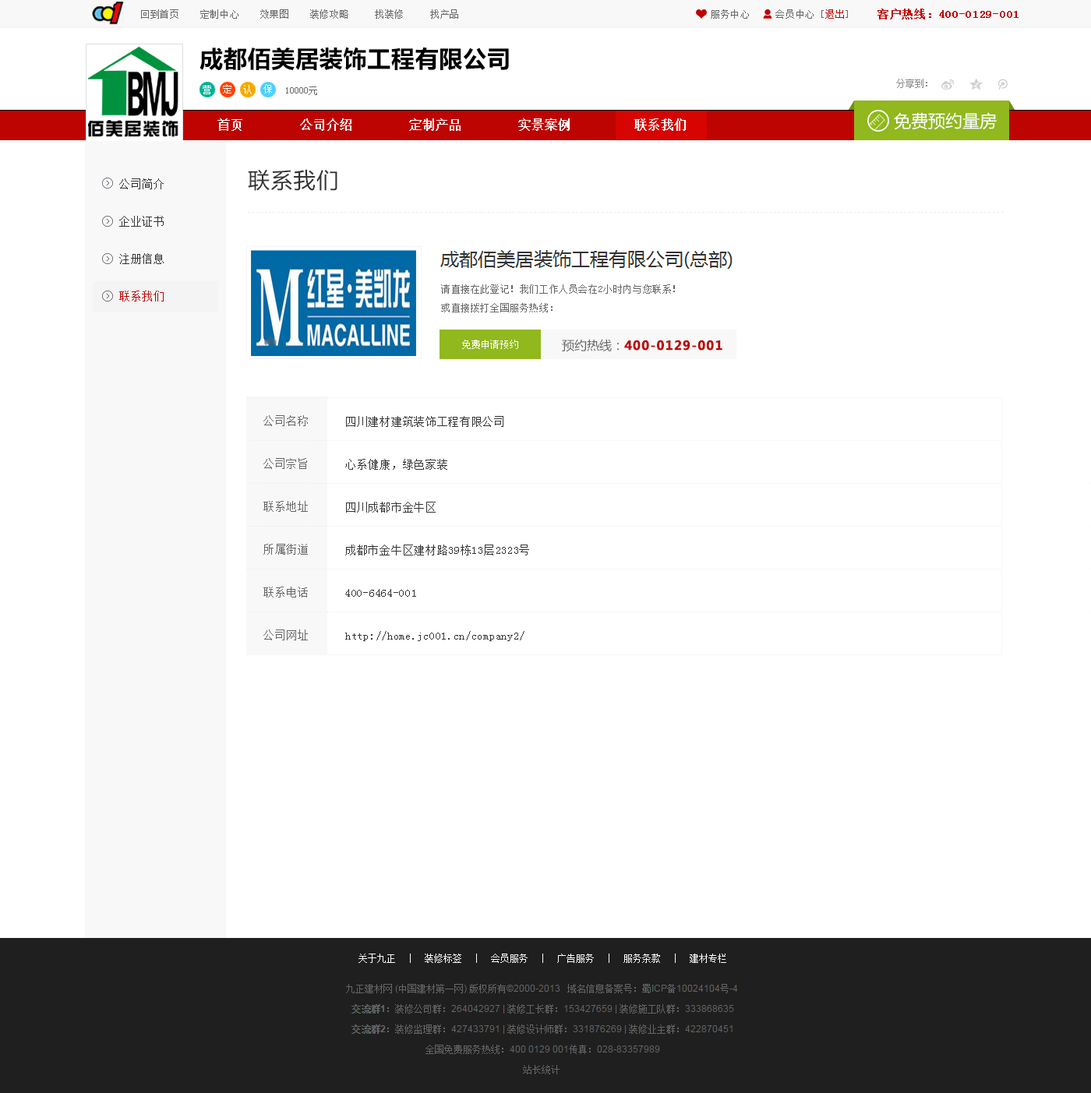
<style>
.page{position:relative;width:1091px;height:1093px;background:#ffffff}
.page>*{position:absolute;margin:0}
.t1{font:9.3px "NSimSun";letter-spacing:0.05em;color:#666666}
.t2{font:9.3px "NSimSun";letter-spacing:0.05em;color:#bc0500}
.t3{font:10.9px "NSimSun";letter-spacing:0.05em;color:#bc0500;font-weight:bold}
.t4{font:23.4px "MicrosoftYaHei-Bold";letter-spacing:0.025em;color:#000000}
.t5{font:9.3px "NSimSun";letter-spacing:0.075em;color:#ffffff}
.t6{font:9.3px "NSimSun";color:#666666}
.t7{font:17.1px "MicrosoftYaHei";color:#ffffff}
.t8{font:12.5px "NSimSun";color:#ffffff;font-weight:bold}
.t9{font:21.8px "MicrosoftYaHei";letter-spacing:0.05em;color:#333333}
.t10{font:10.9px/37.4px "NSimSun";letter-spacing:0.05em;color:#333333}
.t11{font:10.9px/37.4px "NSimSun";letter-spacing:0.05em;color:#bd0401}
.t12{font:4.7px "NSimSun";letter-spacing:0.4em;color:#eeeeee}
.t13{font:9.3px/18.7px "NSimSun";letter-spacing:0.05em;color:#666666}
.t14{font:9px "NSimSun";letter-spacing:0.05em;color:#ffffff}
.t15{font:12.5px "MicrosoftYaHei-Bold";letter-spacing:0.05em;color:#bc0500;font-weight:bold}
.t16{font:12.5px "MicrosoftYaHei";color:#666666}
.t17{font:10.9px/42.9px "NSimSun";letter-spacing:0.05em;color:#666666}
.t18{font:10.9px/42.9px "NSimSun";letter-spacing:0.05em;color:#333333}
</style>
<div class="page">
<p class="t1" style="left:141px;top:9px;width:317px;height:10px">回到首页    定制中心    效果图    装修攻略     找装修     找产品</p>
<p class="t1" style="left:711px;top:9px;width:137px;height:10px">服务中心     会员中心 [<span class="t2">退出</span>]</p>
<p class="t3" style="left:877px;top:9px;width:141px;height:10px">客户热线：400-0129-001</p>
<p class="t4" style="left:199px;top:47px;width:310px;height:23px">成都佰美居装饰工程有限公司</p>
<p class="t5" style="left:203px;top:85px;width:8px;height:9px">营</p>
<p class="t5" style="left:223px;top:84px;width:8px;height:9px">定</p>
<p class="t5" style="left:243px;top:85px;width:9px;height:9px">认</p>
<p class="t5" style="left:263px;top:84px;width:9px;height:9px">保</p>
<p class="t6" style="left:286px;top:86px;width:31px;height:9px">10000元</p>
<p class="t7" style="left:894px;top:112px;width:103px;height:18px">免费预约量房</p>
<p class="t8" style="left:217px;top:118px;width:469px;height:13px">首页        公司介绍        定制产品        实景案例         联系我们</p>
<p class="t9" style="left:248px;top:169px;width:89px;height:22px">联系我们</p>
<p class="t10" style="left:119px;top:178px;width:45px;height:124px">公司简介<br>企业证书<br>注册信息<br><span class="t11">联系我们</span></p>
<p class="t12" style="left:248px;top:212px;width:756px;height:1px">------------------------------------------------------------------------------------------------------------------------------------------------------------------------------------</p>
<p class="t13" style="left:441px;top:284px;width:234px;height:28px">请直接在此登记！我们工作人员会在2小时内与您联系！<br>或直接拨打全国服务热线：</p>
<p class="t14" style="left:462px;top:340px;width:56px;height:9px">免费申请预约</p>
<p class="t15" style="left:562px;top:339px;width:160px;height:13px"><span class="t16">预约热线：</span>400-0129-001</p>
<p class="t17" style="left:263px;top:415px;width:45px;height:225px">公司名称<br>公司宗旨<br>联系地址<br>所属街道<br>联系电话<br>公司网址</p>
<p class="t18" style="left:345px;top:416px;width:184px;height:225px">四川建材建筑装饰工程有限公司<br>心系健康，绿色家装<br>四川成都市金牛区<br>成都市金牛区建材路39栋13层2323号<br>400-6464-001<br>http://home.jc001.cn/company2/</p>
</div>
